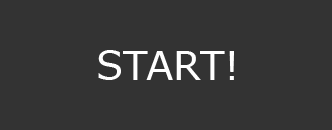
<style>
.page{position:relative;width:332px;height:130px;background:#333333}
.page>*{position:absolute;margin:0}
.t1{font:40px "Verdana";color:#ffffff}
</style>
<div class="page">
<p class="t1" style="left:98px;top:50px;width:136px;height:30px">START!</p>
</div>
